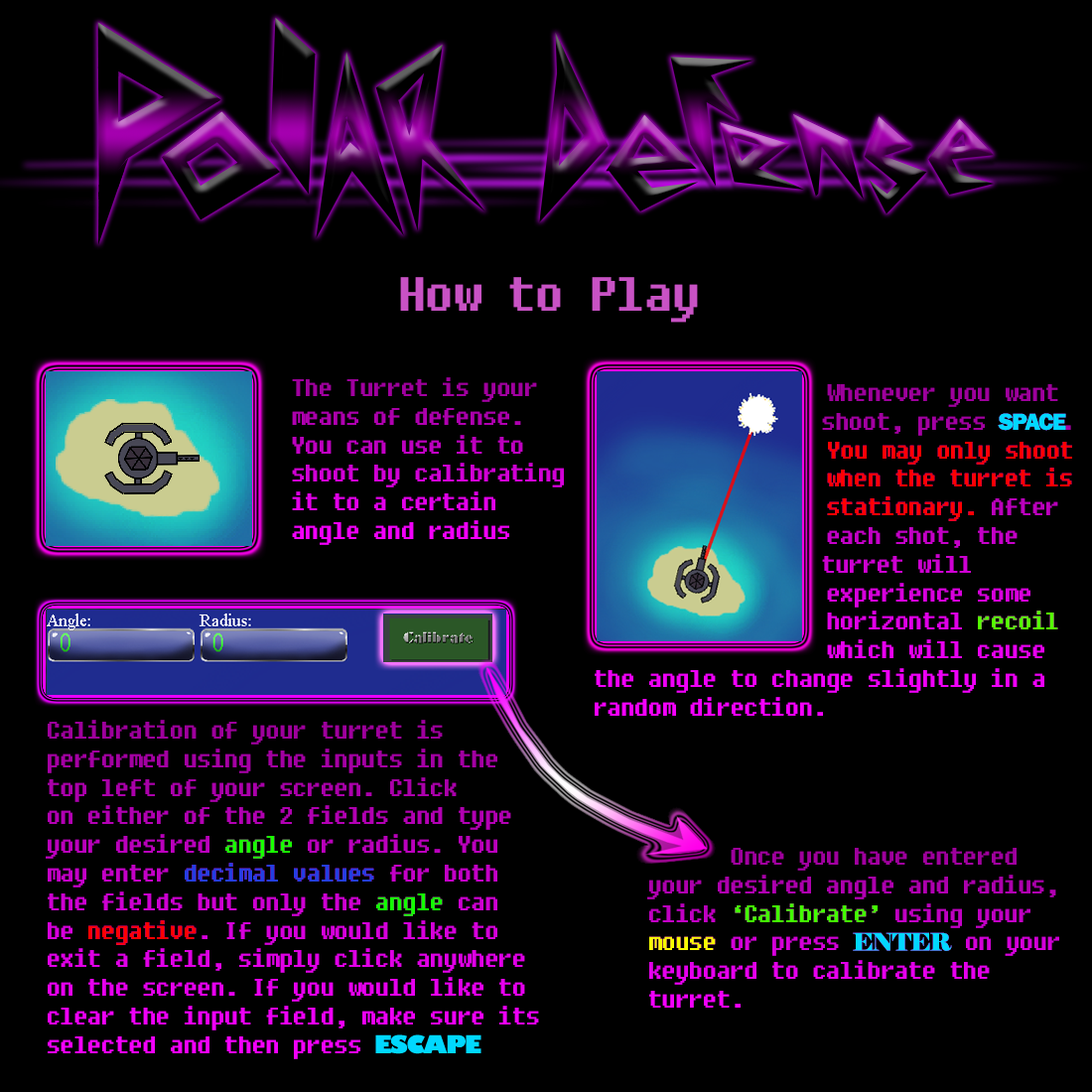
<style>
.page{position:relative;width:1092px;height:1092px;background:#000000}
.page>*{position:absolute;margin:0}
.t1{font:47.7px "Fixedsys";letter-spacing:-0.05em;color:#c852c4}
.t2{font:23.8px "Fixedsys";letter-spacing:-0.05em}
.t3{font:23.8px "FranklinGothic-Heavy";letter-spacing:-0.05em}
.t4{font:23.8px "Elephant-Regular";letter-spacing:-0.05em}
</style>
<div class="page">
<p class="t1" style="left:400px;top:277px;width:298px;height:46px">How to Play</p>
<p class="t2" style="left:292px;top:377px;width:272px;height:168px">The Turret is your<br>                 means of defense.<br>                 You can use it to<br>                 shoot by calibrating<br>                 it to a certain<br>                 angle and radius</p>
<p class="t2" style="left:595px;top:384px;width:477px;height:332px">Whenever you want<br>       shoot, press <span class="t3">SPACE.<br>                                                 </span>You may only shoot<br>                 when the turret is<br>                 stationary. After<br>                 each shot, the<br>       turret will<br>                 experience some<br>                 horizontal recoil<br>                 which will cause<br>the angle to change slightly in a<br>random direction.</p>
<p class="t2" style="left:46px;top:720px;width:493px;height:339px">Calibration of your turret is <br>performed using the inputs in the <br>top left of your screen. Click<br>on either of the 2 fields and type<br>your desired angle or radius. You<br>may enter decimal values for both<br>the fields but only the angle can<br>be negative. If you would like to<br>exit a field, simply click anywhere<br>on the screen. If you would like to<br>clear the input field, make sure its<br>selected and then press</p>
<p class="t2" style="left:647px;top:848px;width:412px;height:160px">Once you have entered<br>your desired angle and radius,<br>click ‘Calibrate’ using your<br>mouse or press <span class="t4">ENTER</span> on your<br>keyboard to calibrate the <br>turret.</p>
</div>
